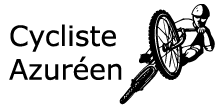
<style>
.page{position:relative;width:220px;height:107px;background:#ffffff}
.page>*{position:absolute;margin:0}
.t1{font:100px "Cycling";color:#000000}
.t2{font:28px "Verdana";color:#000000}
</style>
<div class="page">
<p class="t1" style="left:119px;top:4px;width:96px;height:101px">r</p>
<p class="t2" style="left:9px;top:24px;width:113px;height:57px">Cycliste<br>Azuréen</p>
</div>
